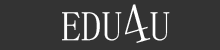
<style>
.page{position:relative;width:220px;height:50px;background:#333333}
.page>*{position:absolute;margin:0}
.t1{font:58.2px "SimSun-ExtB";color:#ffffff}
.t2{font:43.6px "SimSun-ExtB";color:#ffffff}
</style>
<div class="page">
<p class="t1" style="left:125px;top:4px;width:26px;height:39px;rotate:-16deg">4</p>
<p class="t2" style="left:62px;top:12px;width:60px;height:29px">EDU</p>
<p class="t2" style="left:150px;top:12px;width:20px;height:29px">U</p>
</div>
